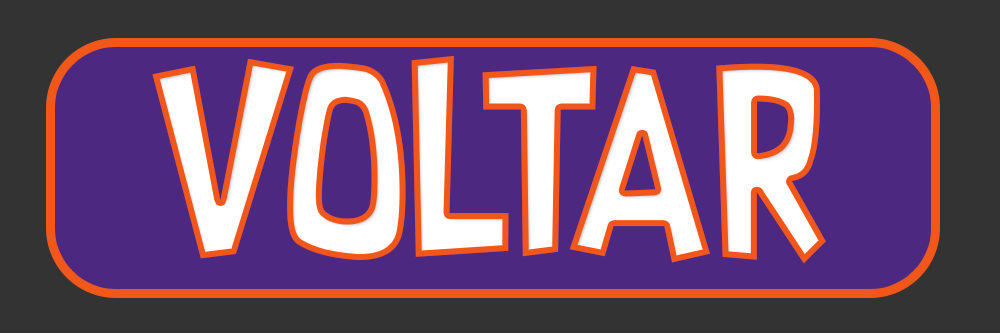
<style>
.page{position:relative;width:1000px;height:333px;background:#4d2881}
.page>*{position:absolute;margin:0}
.t1{font:219.9px "SupersonicRocketship";color:#ffffff}
</style>
<div class="page">
<p class="t1" style="left:152px;top:55px;width:674px;height:209px">voltar</p>
</div>
